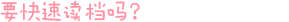
<style>
.page{position:relative;width:289px;height:22px;background:#ffffff}
.page>*{position:absolute;margin:0}
.t1{font:24px "¢è?";color:#ff93a5}
</style>
<div class="page">
<p class="t1" style="left:0px;top:0px;width:140px;height:22px">要快速读档吗？</p>
</div>
